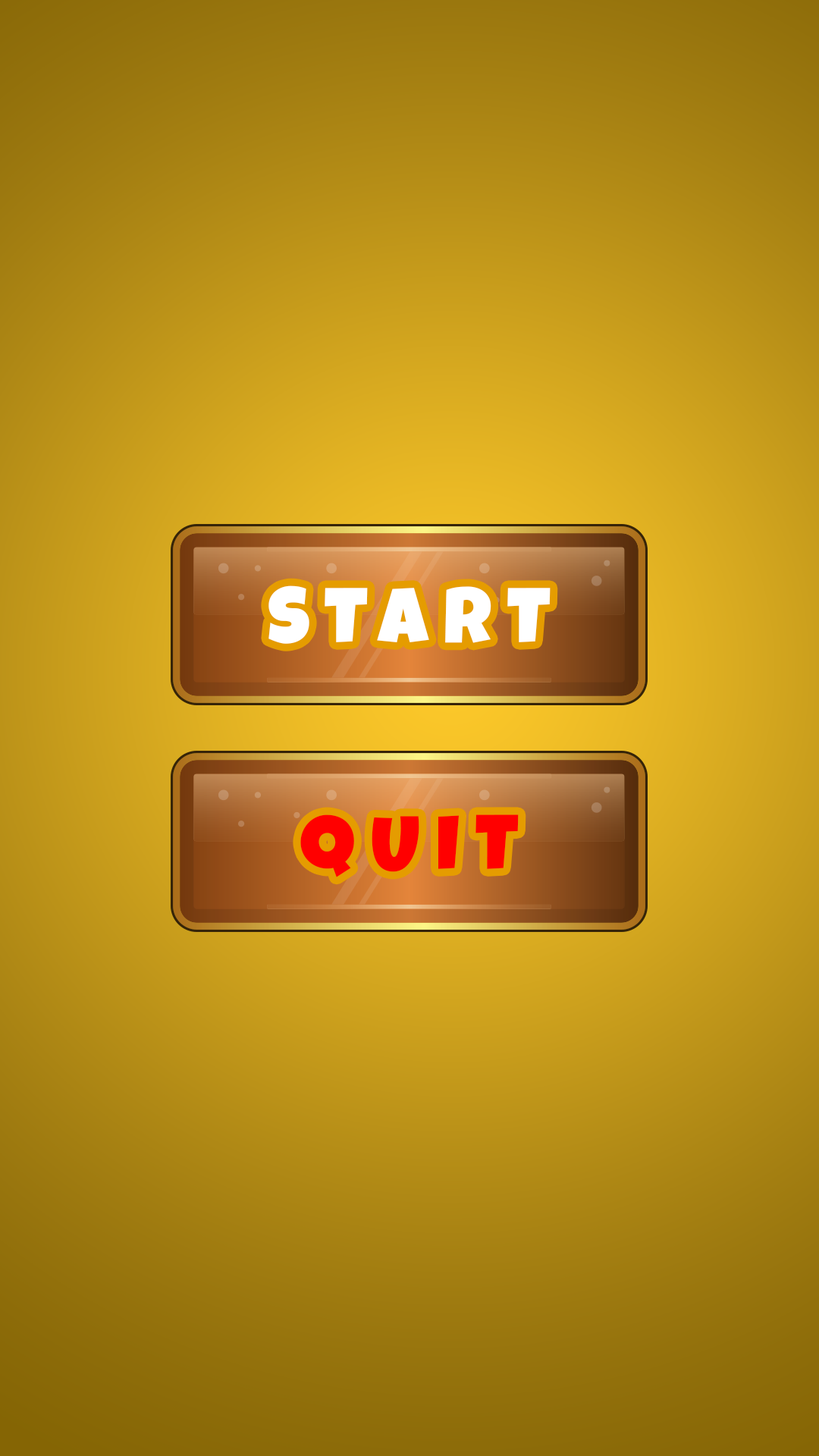
<style>
.page{position:relative;width:819px;height:1456px}
.page>*{position:absolute;margin:0}
.t1{font:79.1px "LuckiestGuy-Regular";letter-spacing:0.2em;color:#ffffff}
.t2{font:79.1px "LuckiestGuy-Regular";letter-spacing:0.2em;color:#ff0000}
</style>
<div class="page">
<p class="t1" style="left:268px;top:585px;width:283px;height:59px">START</p>
<p class="t2" style="left:300px;top:814px;width:219px;height:63px">QUIT</p>
</div>
